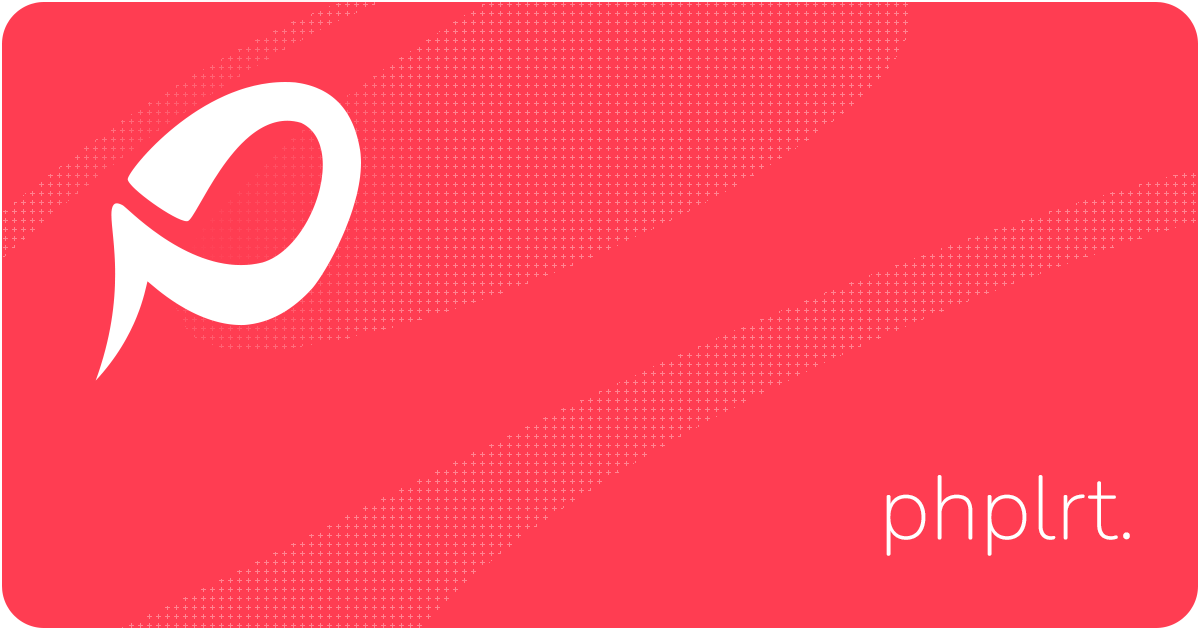
<style>
.page{position:relative;width:1200px;height:630px;background:#ff3d52}
.page>*{position:absolute;margin:0}
.t1{font:90px "Nunito-ExtraLight";color:#ffffff}
</style>
<div class="page">
<p class="t1" style="left:886px;top:475px;width:244px;height:81px">phplrt.</p>
</div>
